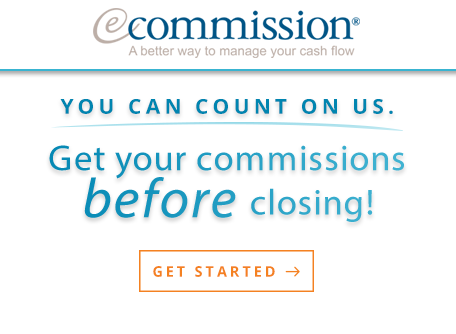
<style>
.page{position:relative;width:456px;height:334px;background:#ffffff}
.page>*{position:absolute;margin:0}
.t1{font:20.5px "OpenSans-Bold";letter-spacing:0.2em;color:#0085b0;text-transform:uppercase}
.t2{font:36.3px/46.9px "MyriadPro-Regular";letter-spacing:0.03em;color:#1997be}
.t3{font:55.9px/46.9px "MyriadPro-It";letter-spacing:0.03em;color:#1997be}
.t4{font:36.3px "MyriadPro-Regular";letter-spacing:0.03em;color:#3db8d3}
.t5{font:14.8px "OpenSans-Bold";letter-spacing:0.2em;color:#f48121;text-transform:uppercase}
</style>
<div class="page">
<p class="t1" style="left:60px;top:99px;width:333px;height:15px">You Can Count on Us.</p>
<p class="t2" style="left:49px;top:145px;width:355px;height:73px;text-align:center">Get your commissions<br><span class="t3">before</span></p>
<p class="t4" style="left:251px;top:188px;width:122px;height:34px">closing!</p>
<p class="t5" style="left:153px;top:266px;width:122px;height:11px">Get starteD</p>
</div>
